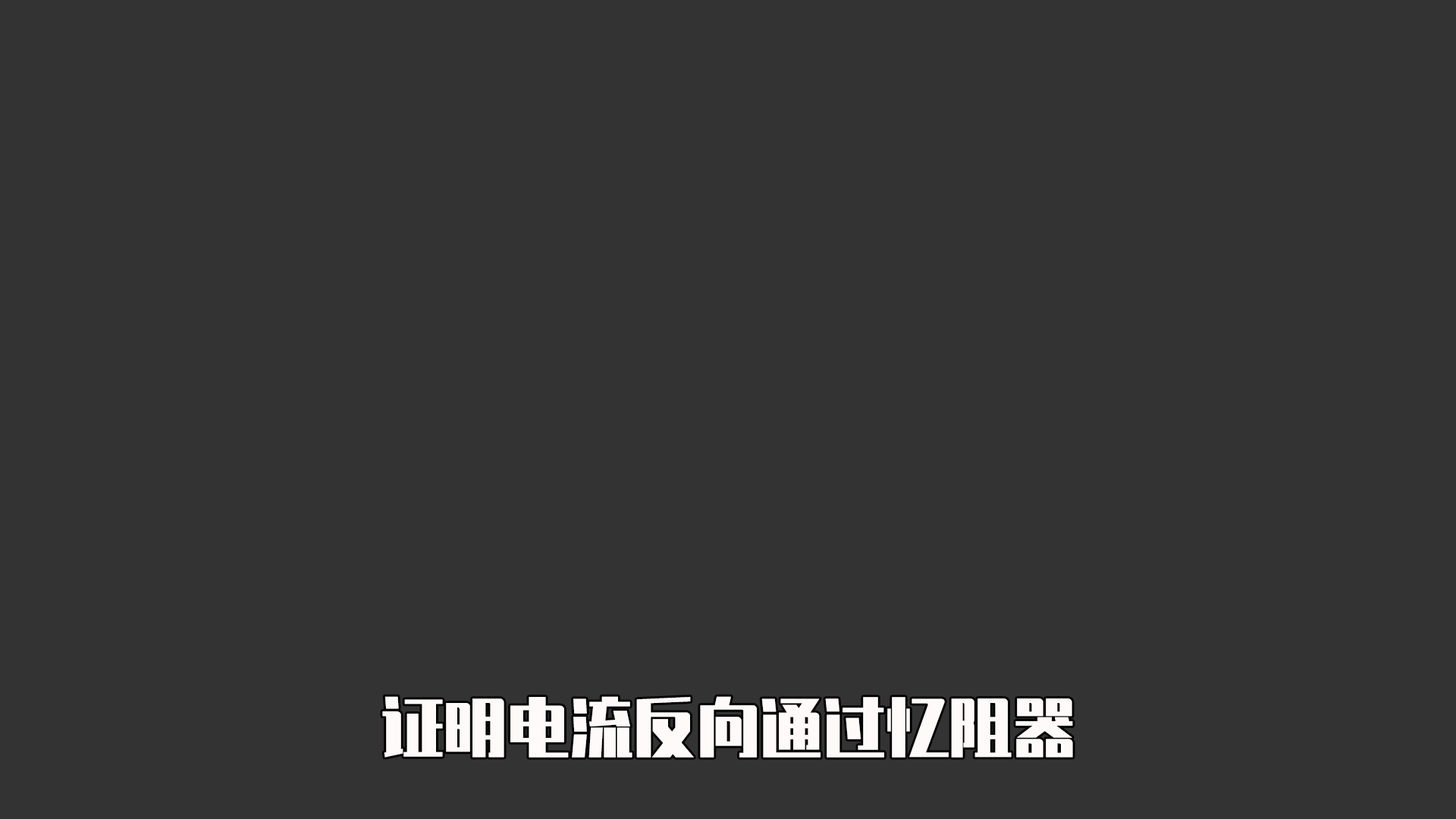
<style>
.page{position:relative;width:1456px;height:819px;background:#333333}
.page>*{position:absolute;margin:0}
.t1{font:63.2px "ZhenyanGB-Regular";color:#fefafa}
</style>
<div class="page">
<p class="t1" style="left:382px;top:696px;width:691px;height:62px">证明电流反向通过忆阻器</p>
</div>
